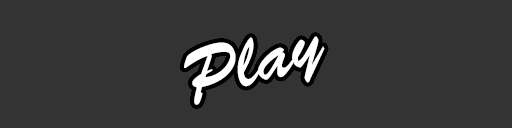
<style>
.page{position:relative;width:512px;height:128px;background:#333333}
.page>*{position:absolute;margin:0}
.t1{font:72px "BrushScriptStd";color:#ffffff}
</style>
<div class="page">
<p class="t1" style="left:184px;top:36px;width:141px;height:69px;rotate:-17deg">Play</p>
</div>
